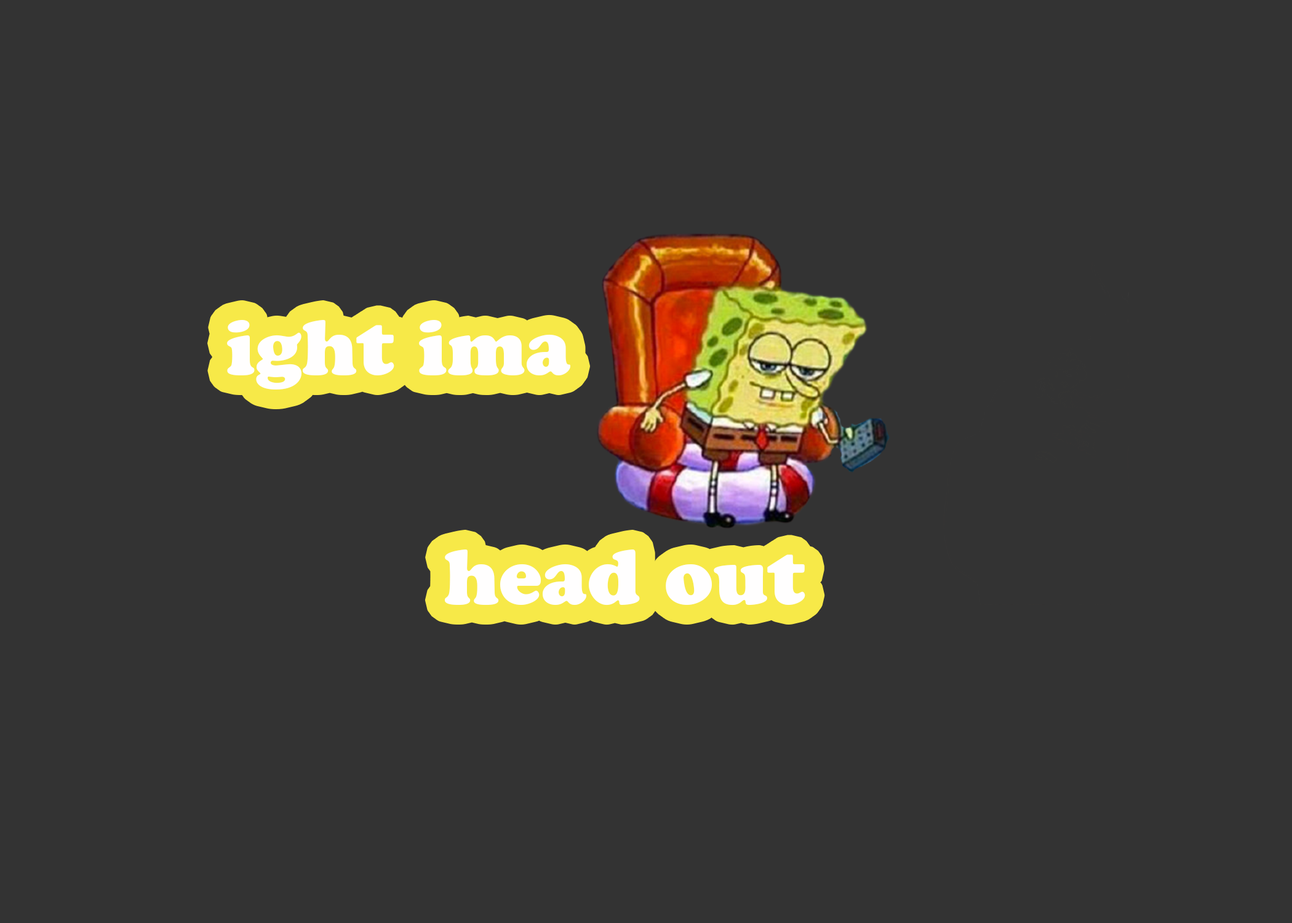
<style>
.page{position:relative;width:1292px;height:923px;background:#333333}
.page>*{position:absolute;margin:0}
.t1{font:76.9px "CooperBlackStd";color:#fffefe}
</style>
<div class="page">
<p class="t1" style="left:227px;top:320px;width:343px;height:69px">ight ima</p>
<p class="t1" style="left:445px;top:549px;width:360px;height:56px">head out</p>
</div>
